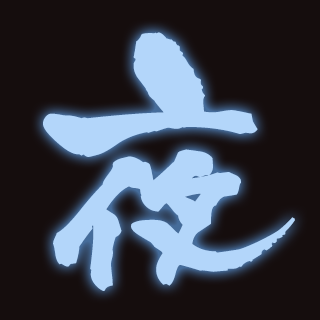
<style>
.page{position:relative;width:320px;height:320px;background:#150d0d}
.page>*{position:absolute;margin:0}
.t1{font:280px "KyoMadoka";color:#b3d6fa;font-weight:bold}
</style>
<div class="page">
<p class="t1" style="left:43px;top:32px;width:252px;height:259px">夜</p>
</div>
